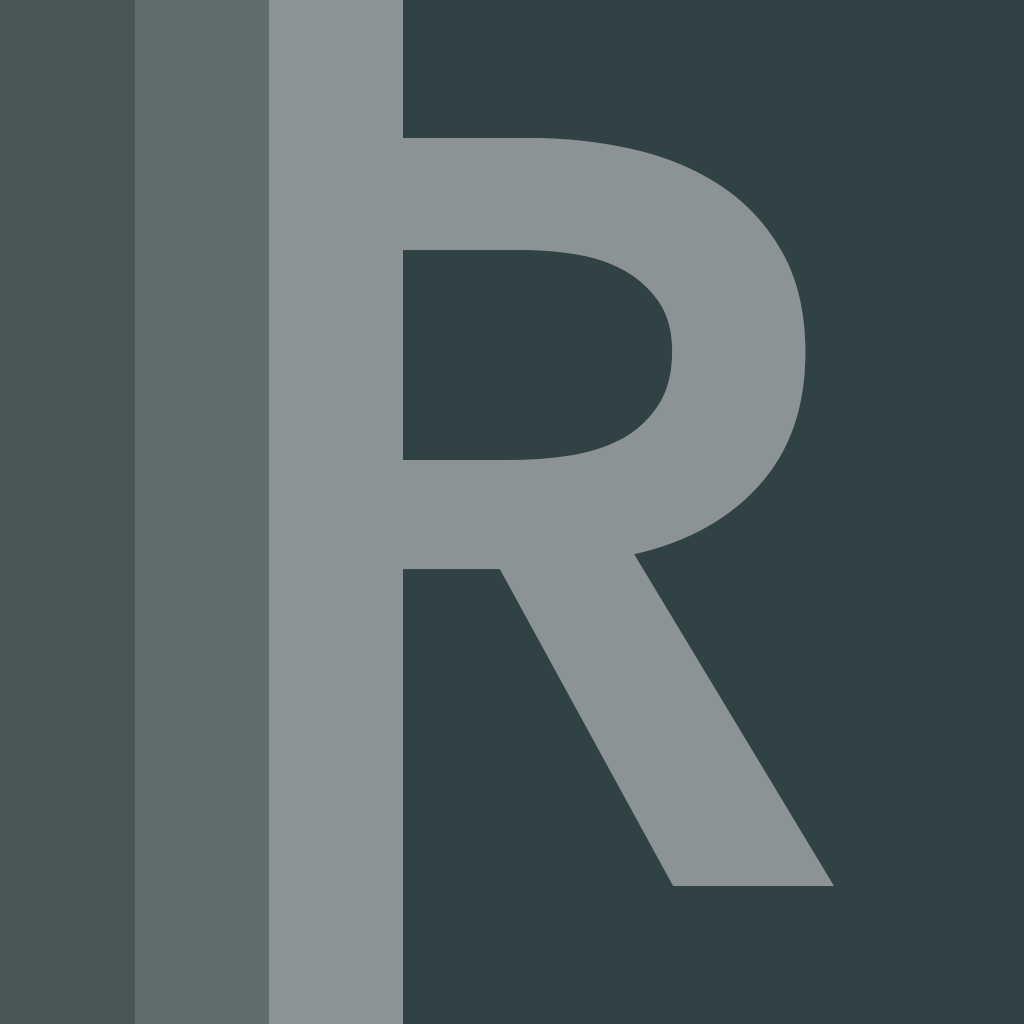
<style>
.page{position:relative;width:1024px;height:1024px;background:#314244}
.page>*{position:absolute;margin:0}
.t1{font:1056.9px "AvenirNext-DemiBold";color:#8c9394}
</style>
<div class="page">
<p class="t1" style="left:269px;top:138px;width:565px;height:748px">R</p>
</div>
